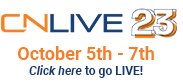
<style>
.page{position:relative;width:183px;height:84px;background:#ffffff}
.page>*{position:absolute;margin:0}
.t1{font:18px "Roboto-Bold";color:#f77e21}
.t2{font:12px "Roboto-BoldItalic";color:#0f3876}
.t3{font:12px "Roboto-Bold";color:#0f3876}
</style>
<div class="page">
<p class="t1" style="left:18px;top:46px;width:136px;height:32px;text-align:center">October 5th - 7th<br><span class="t2">Click here</span><span class="t3"> to go LIVE!</span></p>
</div>
